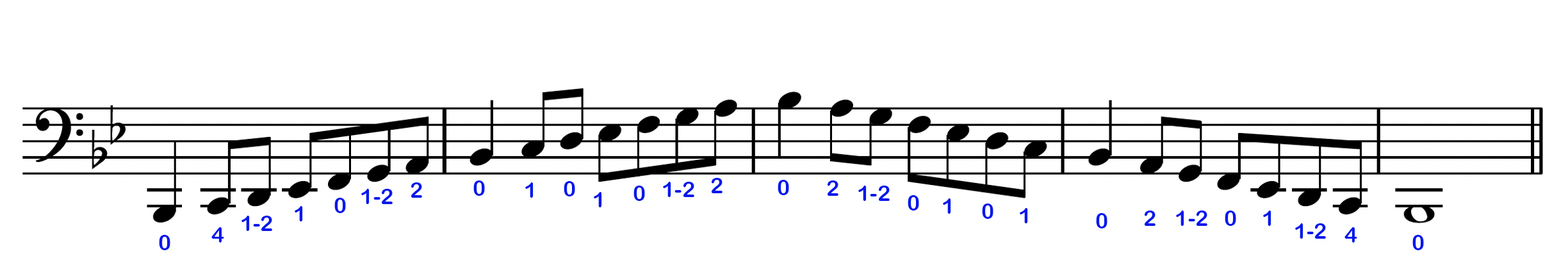
<style>
.page{position:relative;width:1568px;height:279px;background:#ffffff}
.page>*{position:absolute;margin:0}
.t1{font:21.8px "ArialRoundedMTBold";color:#0417ec}
</style>
<div class="page">
<p class="t1" style="left:411px;top:183px;width:11px;height:15px">2</p>
<p class="t1" style="left:473px;top:181px;width:12px;height:15px">0</p>
<p class="t1" style="left:525px;top:183px;width:9px;height:15px">1</p>
<p class="t1" style="left:564px;top:181px;width:11px;height:16px">0</p>
<p class="t1" style="left:633px;top:186px;width:12px;height:15px">0</p>
<p class="t1" style="left:663px;top:182px;width:31px;height:15px">1-2</p>
<p class="t1" style="left:711px;top:178px;width:12px;height:15px">2</p>
<p class="t1" style="left:778px;top:180px;width:11px;height:15px">0</p>
<p class="t1" style="left:827px;top:181px;width:11px;height:15px">2</p>
<p class="t1" style="left:858px;top:186px;width:32px;height:15px">1-2</p>
<p class="t1" style="left:334px;top:198px;width:12px;height:15px">0</p>
<p class="t1" style="left:361px;top:189px;width:32px;height:15px">1-2</p>
<p class="t1" style="left:594px;top:192px;width:8px;height:16px">1</p>
<p class="t1" style="left:908px;top:195px;width:11px;height:16px">0</p>
<p class="t1" style="left:295px;top:206px;width:8px;height:16px">1</p>
<p class="t1" style="left:943px;top:199px;width:8px;height:15px">1</p>
<p class="t1" style="left:982px;top:204px;width:11px;height:15px">0</p>
<p class="t1" style="left:1020px;top:208px;width:8px;height:16px">1</p>
<p class="t1" style="left:241px;top:216px;width:31px;height:15px">1-2</p>
<p class="t1" style="left:1096px;top:213px;width:11px;height:16px">0</p>
<p class="t1" style="left:1144px;top:211px;width:12px;height:15px">2</p>
<p class="t1" style="left:1176px;top:211px;width:31px;height:15px">1-2</p>
<p class="t1" style="left:1225px;top:211px;width:11px;height:15px">0</p>
<p class="t1" style="left:1263px;top:211px;width:8px;height:15px">1</p>
<p class="t1" style="left:211px;top:227px;width:13px;height:16px">4</p>
<p class="t1" style="left:1295px;top:224px;width:31px;height:15px">1-2</p>
<p class="t1" style="left:1344px;top:227px;width:13px;height:16px">4</p>
<p class="t1" style="left:159px;top:235px;width:11px;height:15px">0</p>
<p class="t1" style="left:1412px;top:235px;width:12px;height:15px">0</p>
</div>
